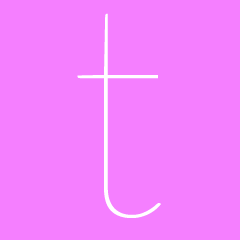
<style>
.page{position:relative;width:240px;height:240px;background:#f57fff}
.page>*{position:absolute;margin:0}
.t1{font:300px "Lato-Hairline";color:#ffffff}
</style>
<div class="page">
<p class="t1" style="left:77px;top:13px;width:84px;height:205px">t</p>
</div>
